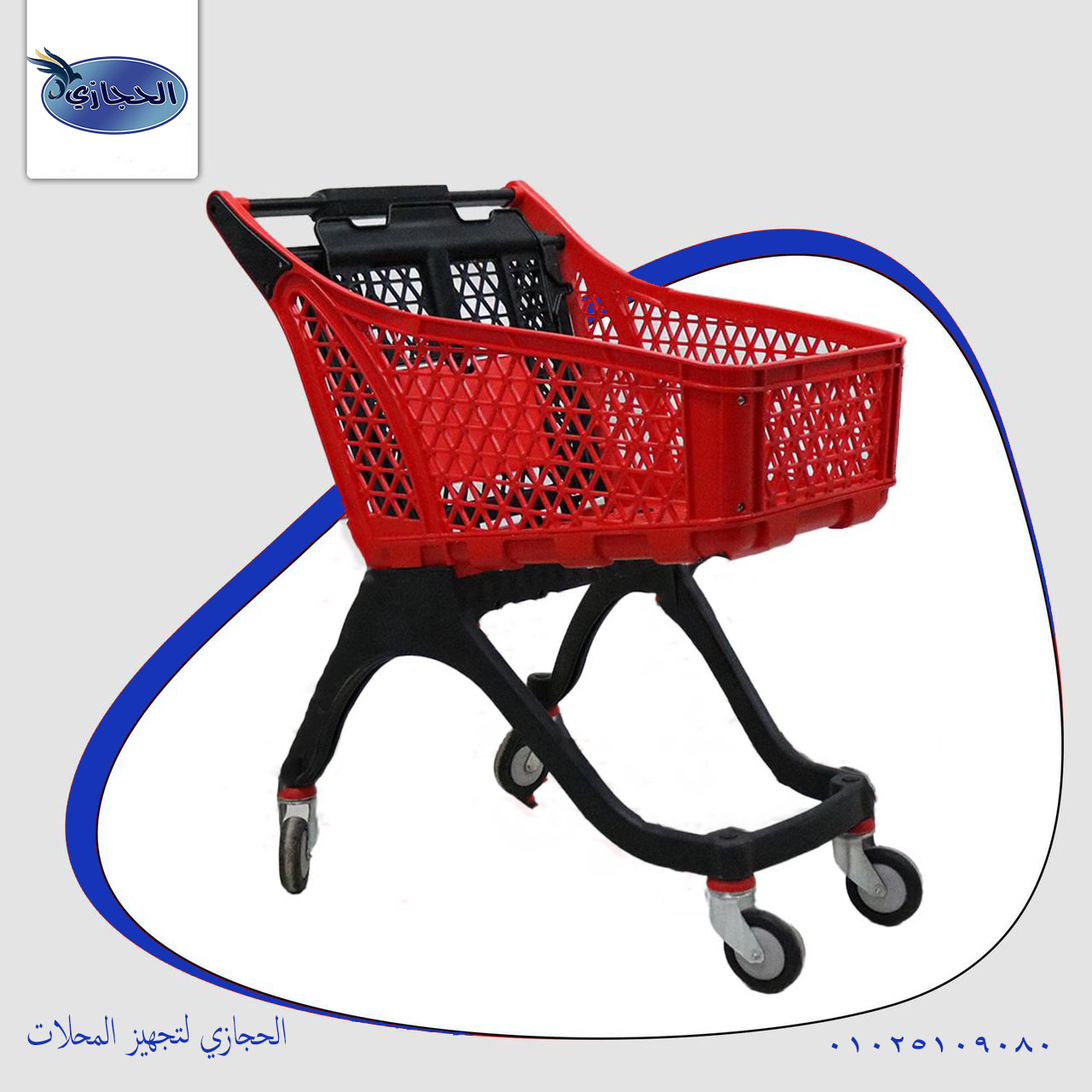
<style>
.page{position:relative;width:1092px;height:1092px;background:#e4e4e4}
.page>*{position:absolute;margin:0}
.t1{font:56.3px "ArabicTypesetting";color:#1534b8;scale:0.84 1}
.t2{font:30.3px "AZ-Topaz";letter-spacing:-0.04em;color:#1534b8;font-weight:bold;scale:1.54 1}
</style>
<div class="page">
<p class="t1" style="left:27px;top:1013px;width:259px;height:47px">الحجازي لتجهيز المحلات</p>
<p class="t2" style="left:831px;top:1037px;width:217px;height:16px">01025109080</p>
</div>
